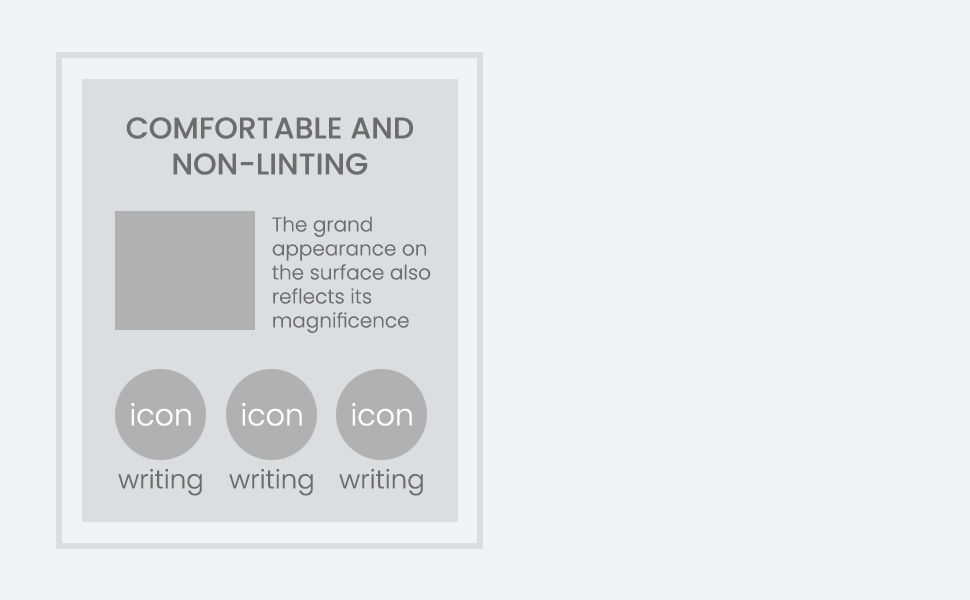
<style>
.page{position:relative;width:970px;height:600px;background:#f2f3f6}
.page>*{position:absolute;margin:0}
.t1{font:30px "Poppins-Medium";color:#6c6c6c}
.t2{font:20px "Poppins-Light";color:#6c6c6c}
.t3{font:30px "Poppins-Light";color:#ffffff}
.t4{font:26px "Poppins-Light";color:#6c6c6c}
</style>
<div class="page">
<p class="t1" style="left:126px;top:117px;width:287px;height:58px;text-align:center">COMFORTABLE AND<br>NON-LINTING</p>
<p class="t2" style="left:272px;top:216px;width:159px;height:117px">The grand<br>appearance on<br>the surface also<br>reflects its <br>magnificence</p>
<p class="t3" style="left:131px;top:402px;width:60px;height:24px">icon</p>
<p class="t3" style="left:242px;top:402px;width:60px;height:24px">icon</p>
<p class="t3" style="left:352px;top:402px;width:60px;height:24px">icon</p>
<p class="t4" style="left:118px;top:468px;width:84px;height:28px">writing</p>
<p class="t4" style="left:229px;top:468px;width:84px;height:28px">writing</p>
<p class="t4" style="left:339px;top:468px;width:84px;height:28px">writing</p>
</div>
